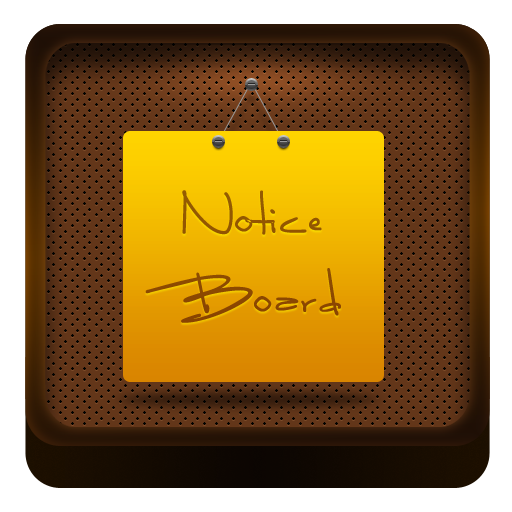
<style>
.page{position:relative;width:512px;height:512px}
.page>*{position:absolute;margin:0}
.t1{font:48px/80px "LunaBar";color:#8c4901;font-weight:bold}
</style>
<div class="page">
<p class="t1" style="left:145px;top:190px;width:196px;height:133px;text-align:center">Notice Board</p>
</div>
